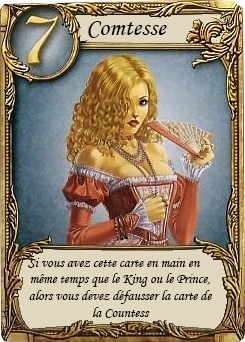
<style>
.page{position:relative;width:245px;height:342px}
.page>*{position:absolute;margin:0}
.t1{font:25px "MonotypeCorsiva";color:#000000}
.t2{font:14px "MonotypeCorsiva";color:#000000}
</style>
<div class="page">
<p class="t1" style="left:88px;top:21px;width:79px;height:17px">Comtesse</p>
<p class="t2" style="left:28px;top:258px;width:184px;height:60px">Si vous avez cette carte en main en <br>même temps que le King ou le Prince, alors vous devez défausser la carte de la Countess</p>
</div>
